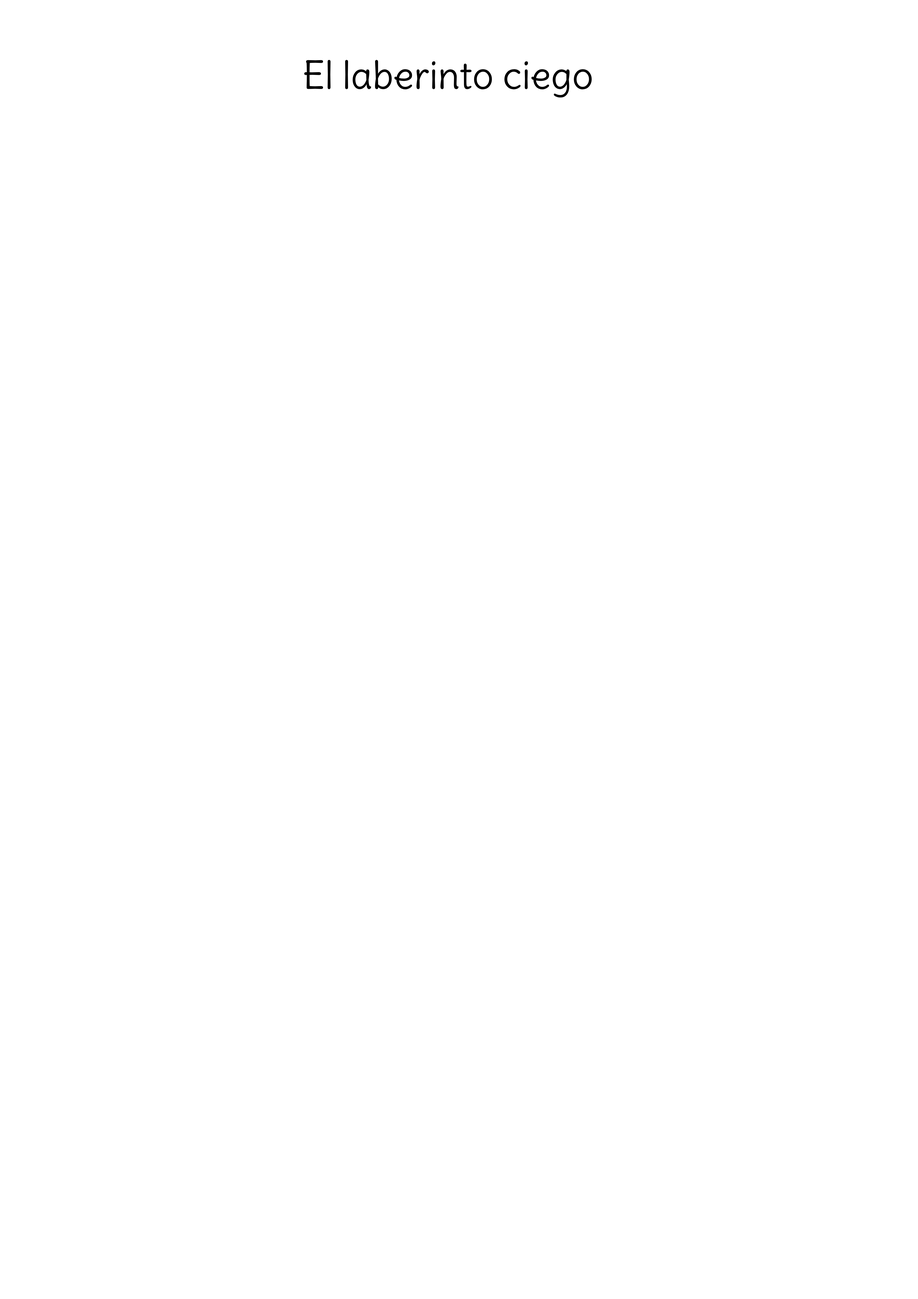
<style>
.page{position:relative;width:918px;height:1299px;background:#ffffff}
.page>*{position:absolute;margin:0}
.t1{font:38px "Delius-Regular";color:#000000}
</style>
<div class="page">
<p class="t1" style="left:304px;top:60px;width:288px;height:38px">El laberinto ciego</p>
</div>
